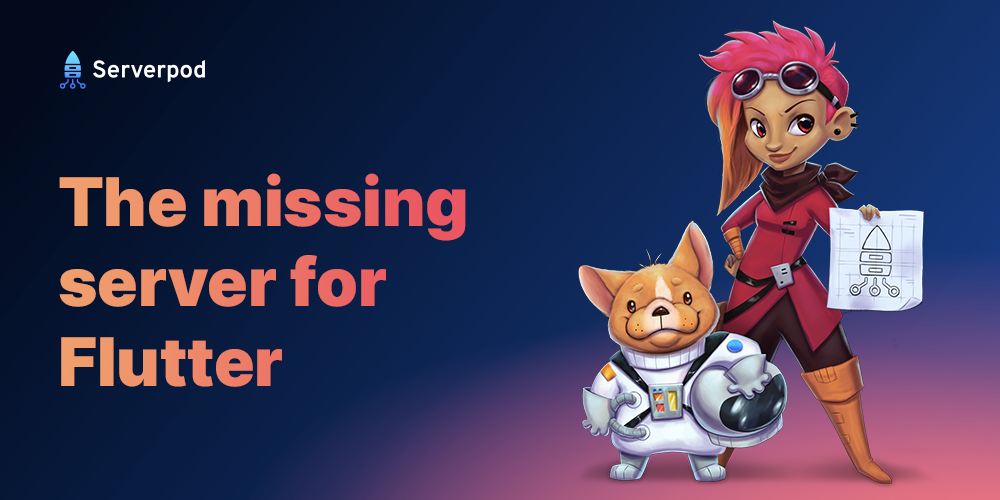
<style>
.page{position:relative;width:1000px;height:500px}
.page>*{position:absolute;margin:0}
.t1{font:66.9px "Inter-Black"}
</style>
<div class="page">
<p class="t1" style="left:59px;top:173px;width:407px;height:214px">The missing server for Flutter</p>
</div>
